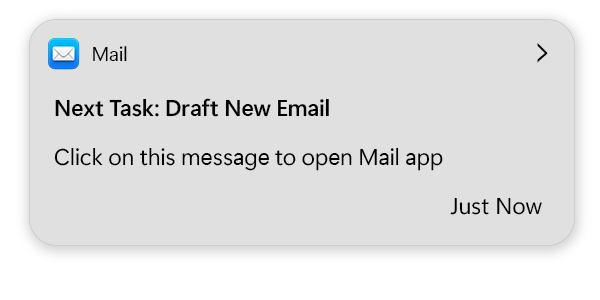
<style>
.page{position:relative;width:600px;height:300px;background:#e0e0e0}
.page>*{position:absolute;margin:0}
.t1{font:20px "SegoeUIVariable-RegularDisplay";color:#000000}
.t2{font:41.2px "SegoeUIVariable";color:#000000;scale:0.56 1}
.t3{font:23px "SegoeUIVariable-SemiboldDisplay";color:#000000}
.t4{font:23px "SegoeUIVariable-RegularDisplay";color:#000000}
.t5{font:23px "SegoeUIVariable";color:#000000}
</style>
<div class="page">
<p class="t1" style="left:93px;top:46px;width:34px;height:16px">Mail</p>
<p class="t2" style="left:537px;top:43px;width:11px;height:20px">&gt;</p>
<p class="t3" style="left:55px;top:98px;width:274px;height:19px">Next Task: Draft New Email</p>
<p class="t4" style="left:54px;top:147px;width:389px;height:24px">Click on this message to open Mail app</p>
<p class="t5" style="left:450px;top:197px;width:92px;height:18px">Just Now</p>
</div>
